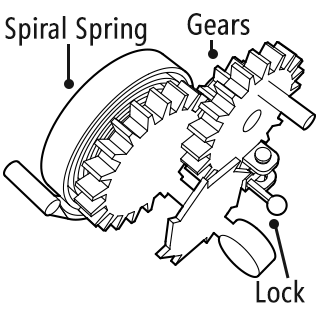
<style>
.page{position:relative;width:320px;height:320px;background:#ffffff}
.page>*{position:absolute;margin:0}
.t1{font:30px "SegoeCondensed";color:#171717;font-weight:bold}
</style>
<div class="page">
<p class="t1" style="left:5px;top:16px;width:142px;height:30px">Spiral Spring</p>
<p class="t1" style="left:187px;top:13px;width:63px;height:22px">Gears</p>
<p class="t1" style="left:256px;top:279px;width:49px;height:24px">Lock</p>
</div>
